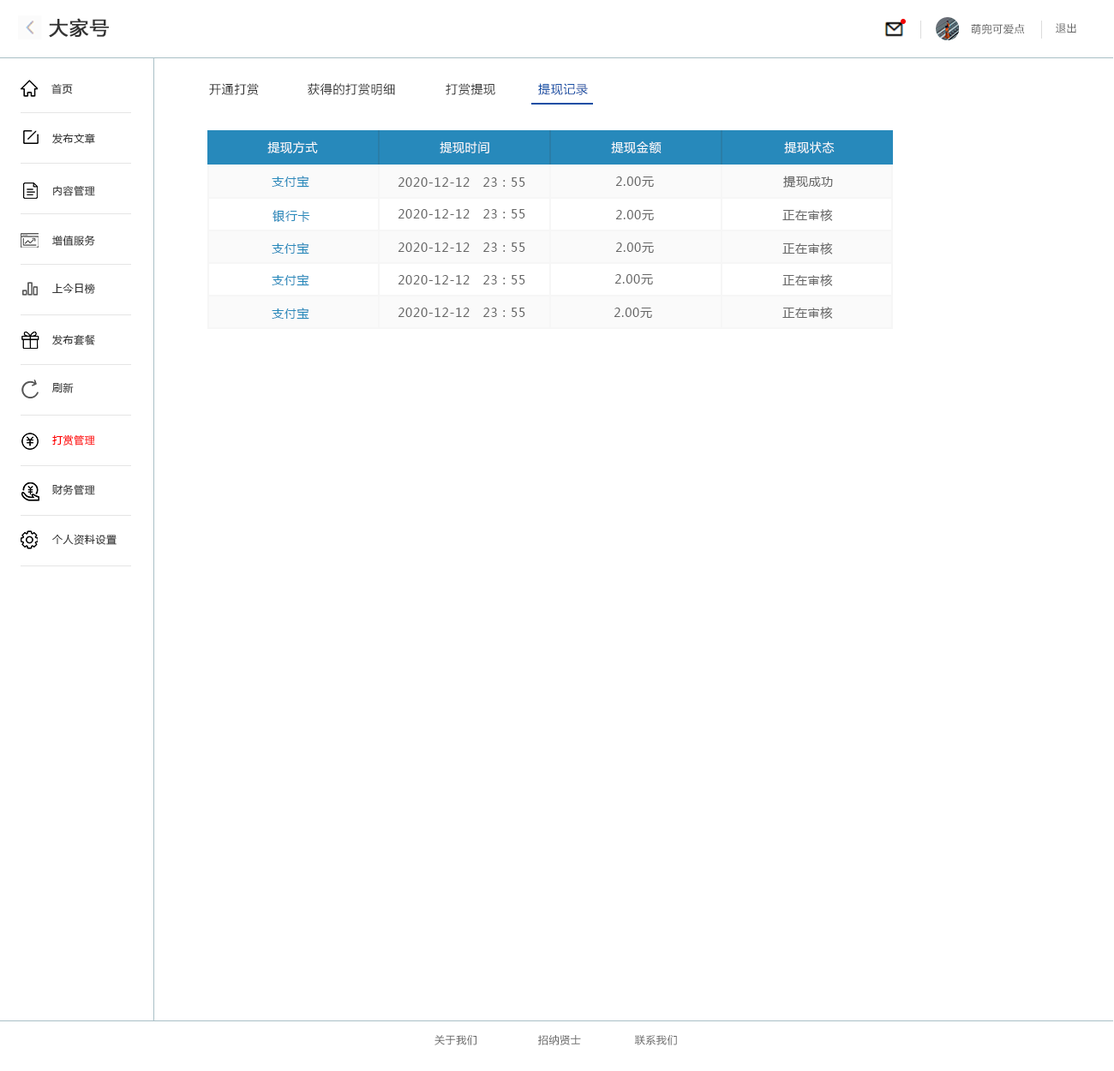
<style>
.page{position:relative;width:1114px;height:1071px;background:#ffffff}
.page>*{position:absolute;margin:0}
.t1{font:18.8px "MicrosoftYaHei";letter-spacing:0.05em;color:#333333;font-weight:bold}
.t2{font:10.3px "MicrosoftYaHei";letter-spacing:0.05em;color:#666666}
.t3{font:10.3px "MicrosoftYaHei";letter-spacing:0.05em;color:#333333}
.t4{font:12px "MicrosoftYaHei";letter-spacing:0.05em;color:#333333}
.t5{font:12px "MicrosoftYaHei";letter-spacing:0.05em;color:#144ea4}
.t6{font:12px "MicrosoftYaHei";letter-spacing:0.05em;color:#ffffff}
.t7{font:12px "MicrosoftYaHei";letter-spacing:0.05em;color:#2789bb}
.t8{font:12px "MicrosoftYaHei";letter-spacing:0.05em;color:#666666}
.t9{font:10.3px "MicrosoftYaHei";letter-spacing:0.05em;color:#ff0000}
</style>
<div class="page">
<p class="t1" style="left:49px;top:18px;width:60px;height:20px">大家号</p>
<p class="t2" style="left:971px;top:24px;width:54px;height:10px">萌兜可爱点</p>
<p class="t2" style="left:1055px;top:23px;width:21px;height:10px">退出</p>
<p class="t3" style="left:51px;top:83px;width:22px;height:11px">首页</p>
<p class="t4" style="left:209px;top:83px;width:50px;height:12px">开通打赏</p>
<p class="t4" style="left:308px;top:83px;width:87px;height:12px">获得的打赏明细</p>
<p class="t4" style="left:445px;top:83px;width:50px;height:12px">打赏提现</p>
<p class="t5" style="left:538px;top:83px;width:50px;height:12px">提现记录</p>
<p class="t3" style="left:52px;top:133px;width:43px;height:11px">发布文章</p>
<p class="t6" style="left:267px;top:141px;width:51px;height:12px">提现方式</p>
<p class="t6" style="left:439px;top:141px;width:50px;height:12px">提现时间</p>
<p class="t6" style="left:611px;top:141px;width:50px;height:12px">提现金额</p>
<p class="t6" style="left:784px;top:141px;width:50px;height:12px">提现状态</p>
<p class="t3" style="left:53px;top:185px;width:42px;height:11px">内容管理</p>
<p class="t7" style="left:272px;top:176px;width:37px;height:12px">支付宝</p>
<p class="t8" style="left:397px;top:177px;width:128px;height:10px">2020-12-12   23：55</p>
<p class="t8" style="left:615px;top:176px;width:39px;height:11px">2.00元</p>
<p class="t8" style="left:783px;top:176px;width:50px;height:12px">提现成功</p>
<p class="t7" style="left:272px;top:210px;width:38px;height:12px">银行卡</p>
<p class="t8" style="left:397px;top:209px;width:128px;height:9px">2020-12-12   23：55</p>
<p class="t8" style="left:615px;top:210px;width:39px;height:10px">2.00元</p>
<p class="t8" style="left:782px;top:209px;width:51px;height:13px">正在审核</p>
<p class="t3" style="left:52px;top:235px;width:43px;height:11px">增值服务</p>
<p class="t7" style="left:272px;top:242px;width:37px;height:12px">支付宝</p>
<p class="t8" style="left:397px;top:242px;width:128px;height:10px">2020-12-12   23：55</p>
<p class="t8" style="left:615px;top:242px;width:39px;height:11px">2.00元</p>
<p class="t8" style="left:782px;top:242px;width:51px;height:13px">正在审核</p>
<p class="t7" style="left:272px;top:274px;width:37px;height:12px">支付宝</p>
<p class="t8" style="left:397px;top:275px;width:128px;height:9px">2020-12-12   23：55</p>
<p class="t8" style="left:614px;top:274px;width:39px;height:10px">2.00元</p>
<p class="t8" style="left:782px;top:274px;width:51px;height:13px">正在审核</p>
<p class="t3" style="left:52px;top:283px;width:43px;height:11px">上今日榜</p>
<p class="t7" style="left:272px;top:308px;width:37px;height:12px">支付宝</p>
<p class="t8" style="left:397px;top:308px;width:128px;height:9px">2020-12-12   23：55</p>
<p class="t8" style="left:613px;top:308px;width:39px;height:10px">2.00元</p>
<p class="t8" style="left:782px;top:307px;width:51px;height:13px">正在审核</p>
<p class="t3" style="left:52px;top:334px;width:43px;height:11px">发布套餐</p>
<p class="t3" style="left:52px;top:383px;width:22px;height:10px">刷新</p>
<p class="t9" style="left:52px;top:434px;width:43px;height:11px">打赏管理</p>
<p class="t3" style="left:52px;top:484px;width:43px;height:11px">财务管理</p>
<p class="t3" style="left:52px;top:534px;width:65px;height:11px">个人资料设置</p>
<p class="t2" style="left:434px;top:1035px;width:243px;height:10px">关于我们                 招纳贤士               联系我们</p>
</div>
